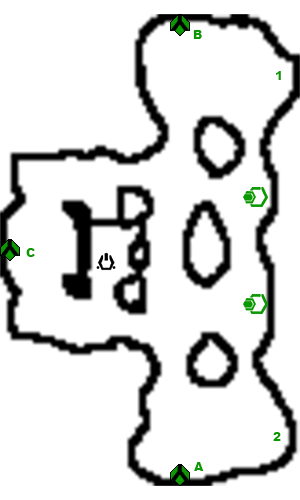
<style>
.page{position:relative;width:300px;height:500px;background:#ffffff}
.page>*{position:absolute;margin:0}
.t1{font:12px "Arial-Black";color:#0c9801}
</style>
<div class="page">
<p class="t1" style="left:193px;top:30px;width:9px;height:9px">B</p>
<p class="t1" style="left:276px;top:71px;width:5px;height:9px">1</p>
<p class="t1" style="left:26px;top:248px;width:9px;height:9px">C</p>
<p class="t1" style="left:273px;top:432px;width:8px;height:9px">2</p>
<p class="t1" style="left:194px;top:462px;width:10px;height:9px">A</p>
</div>
